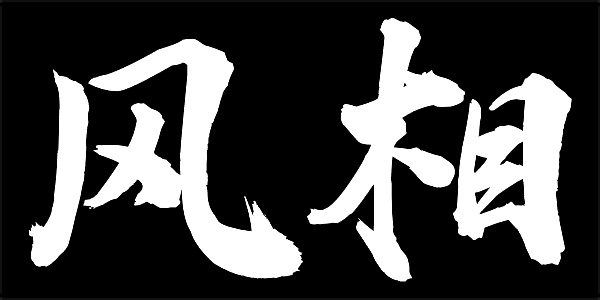
<style>
.page{position:relative;width:600px;height:300px;background:#000000}
.page>*{position:absolute;margin:0}
.t1{font:300px "Dream-XiaYiGBT";color:#ffffff}
</style>
<div class="page">
<p class="t1" style="left:28px;top:18px;width:544px;height:264px">风相</p>
</div>
